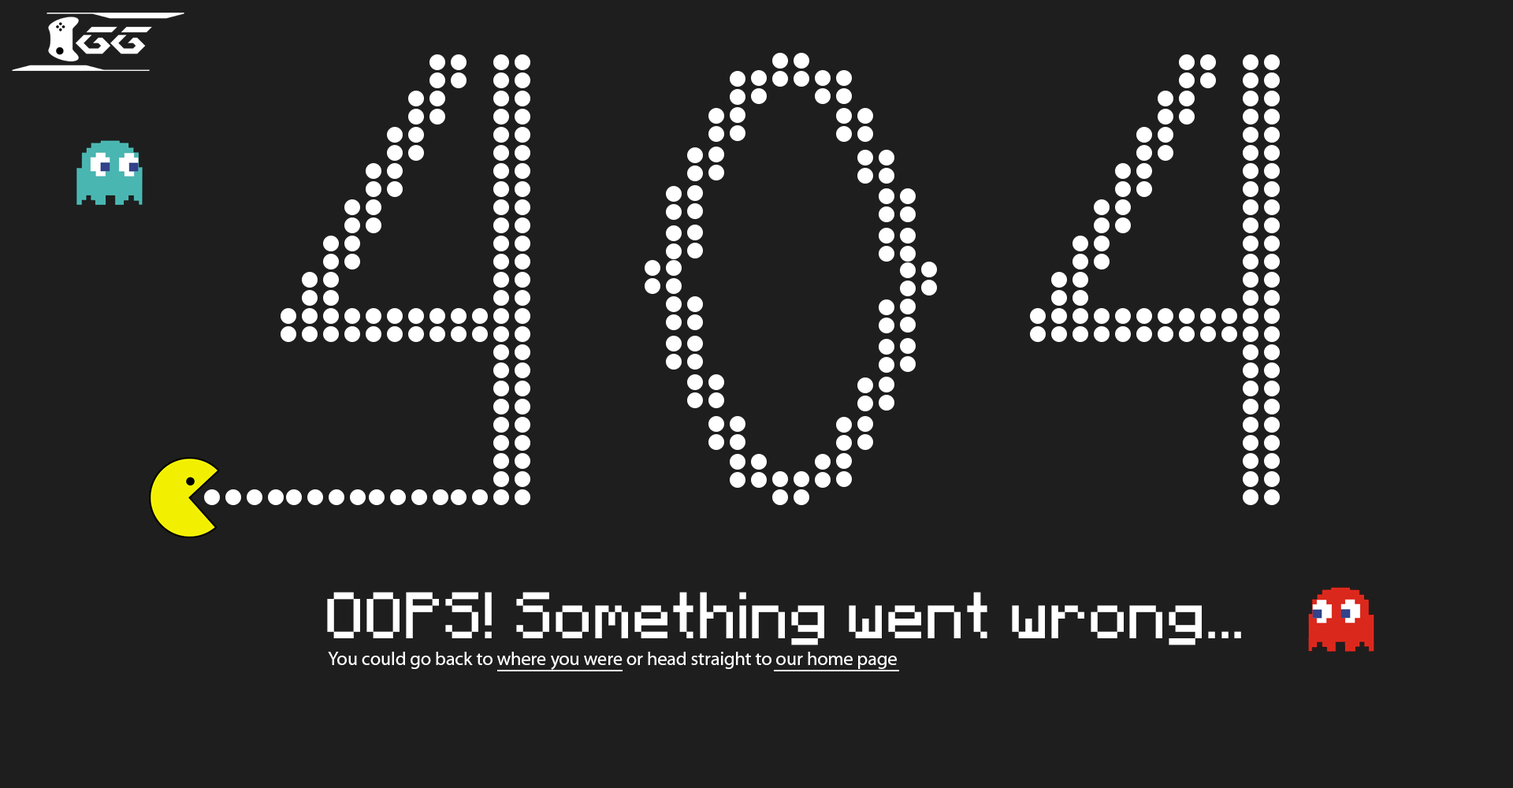
<style>
.page{position:relative;width:1513px;height:788px;background:#1e1e1e}
.page>*{position:absolute;margin:0}
.t1{font:52.4px "Minecrafter";color:#ffffff}
.t2{font:18.9px "MyriadPro-Regular";color:#ffffff}
</style>
<div class="page">
<p class="t1" style="left:327px;top:592px;width:914px;height:53px">OOPS! Something went wrong...</p>
<p class="t2" style="left:328px;top:652px;width:569px;height:18px">You could go back to where you were or head straight to our home page</p>
</div>
